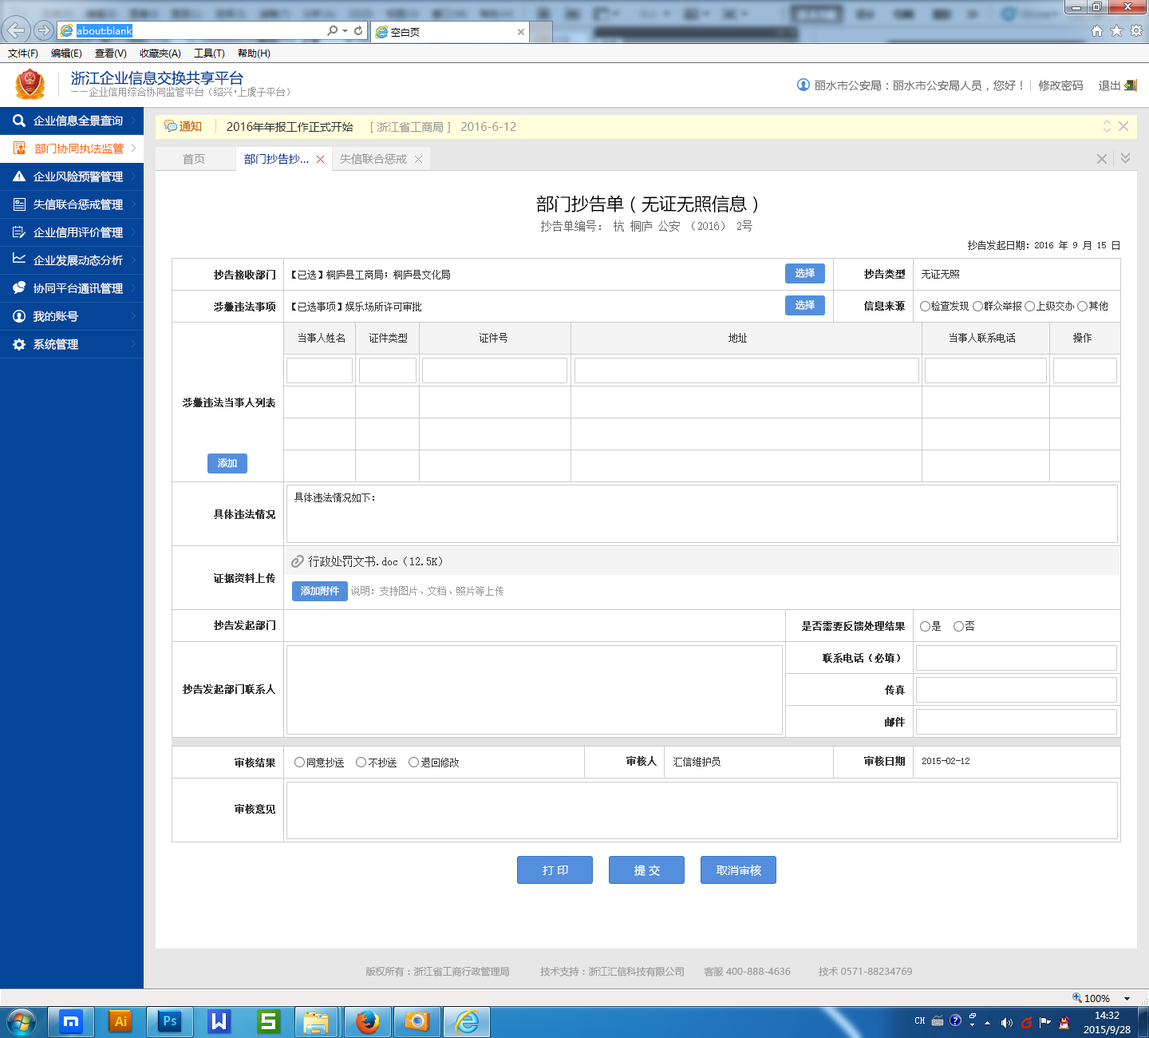
<style>
.page{position:relative;width:1149px;height:1038px;background:#ffffff}
.page>*{position:absolute;margin:0}
.t1{font:14.4px "MicrosoftYaHei";color:#044599}
.t2{font:9.6px "SimSun";color:#999999}
.t3{font:11.2px "MicrosoftYaHei";color:#666666}
.t4{font:11.2px/27.9px "MicrosoftYaHei";color:#ffffff}
.t5{font:11.2px "MicrosoftYaHei";color:#cc6600}
.t6{font:11.2px "MicrosoftYaHei";color:#999999}
.t7{font:11.2px "MicrosoftYaHei";color:#333333}
.t8{font:11.2px "MicrosoftYaHei";color:#ff6600}
.t9{font:11.2px "MicrosoftYaHei";color:#003399}
.t10{font:17.6px "MicrosoftYaHei";color:#000000}
.t11{font:11.2px "SimSun";color:#666666}
.t12{font:9.6px "SimSun";color:#333333}
.t13{font:9.6px/31.9px "SimSun";color:#333333;font-weight:bold}
.t14{font:9.6px/31.9px "SimSun";color:#333333}
.t15{font:9.6px "MicrosoftYaHei";color:#ffffff}
.t16{font:11.2px "SimSun";color:#333333}
.t17{font:9.6px/30.3px "SimSun";color:#333333;font-weight:bold}
.t18{font:9.6px "SimSun";color:#333333;font-weight:bold}
.t19{font:11.2px "MicrosoftYaHei";color:#ffffff}
.t20{font:9.6px "MicrosoftYaHei";color:#999999}
</style>
<div class="page">
<p class="t1" style="left:71px;top:70px;width:172px;height:15px">浙江企业信息交换共享平台</p>
<p class="t2" style="left:71px;top:87px;width:219px;height:10px">——企业信用综合协同监管平台（绍兴•上虞子平台）</p>
<p class="t3" style="left:815px;top:80px;width:207px;height:12px">丽水市公安局：丽水市公安局人员，您好！</p>
<p class="t3" style="left:1038px;top:80px;width:46px;height:12px">修改密码</p>
<p class="t3" style="left:1099px;top:80px;width:22px;height:11px">退出</p>
<p class="t4" style="left:33px;top:115px;width:91px;height:235px">企业信息全景查询<br>部门协同执法监管<br>企业风险预警管理<br>失信联合惩戒管理<br>企业信用评价管理<br>企业发展动态分析<br>协同平台通讯管理<br>我的账号<br>系统管理</p>
<p class="t5" style="left:180px;top:121px;width:22px;height:11px">通知</p>
<p class="t6" style="left:227px;top:121px;width:289px;height:11px"><span class="t7">2016年年报工作正式开始     </span>[ 浙江省工商局 ]   2016-6-12</p>
<p class="t8" style="left:34px;top:143px;width:91px;height:11px">部门协同执法监管</p>
<p class="t6" style="left:183px;top:153px;width:22px;height:11px">首页</p>
<p class="t9" style="left:244px;top:153px;width:65px;height:11px">部门抄告抄…</p>
<p class="t6" style="left:340px;top:153px;width:67px;height:11px">失信联合惩戒</p>
<p class="t10" style="left:536px;top:195px;width:221px;height:18px">部门抄告单（无证无照信息）</p>
<p class="t11" style="left:541px;top:220px;width:212px;height:11px">抄告单编号： 杭 桐庐 公安 （2016） 2号</p>
<p class="t12" style="left:968px;top:240px;width:152px;height:10px">抄告发起日期：2016 年 9 月 15 日</p>
<p class="t13" style="left:183px;top:270px;width:92px;height:424px;text-align:right">抄告接收部门<br>涉嫌违法事项<br><br><br>涉嫌违法当事人列表<br><br><br>具体违法情况<br><br>证据资料上传<br><br>抄告发起部门<br><br>抄告发起部门联系人</p>
<p class="t14" style="left:292px;top:270px;width:158px;height:41px">【已选】桐庐县工商局；桐庐县文化局<br>【已选事项】娱乐场所许可审批</p>
<p class="t15" style="left:796px;top:268px;width:19px;height:10px">选择</p>
<p class="t13" style="left:864px;top:269px;width:41px;height:41px">抄告类型<br>信息来源</p>
<p class="t12" style="left:922px;top:269px;width:37px;height:10px">无证无照</p>
<p class="t15" style="left:796px;top:300px;width:19px;height:10px">选择</p>
<p class="t12" style="left:931px;top:301px;width:177px;height:9px">检查发现   群众举报   上级交办   其他</p>
<p class="t12" style="left:298px;top:333px;width:794px;height:9px">当事人姓名     证件类型               证件号                                              地址                                          当事人联系电话            操作</p>
<p class="t15" style="left:218px;top:458px;width:19px;height:10px">添加</p>
<p class="t12" style="left:295px;top:492px;width:79px;height:10px">具体违法情况如下：</p>
<p class="t16" style="left:309px;top:555px;width:133px;height:12px">行政处罚文书.doc（12.5K）</p>
<p class="t15" style="left:301px;top:586px;width:38px;height:9px">添加附件</p>
<p class="t2" style="left:351px;top:586px;width:153px;height:9px">说明：支持图片、文档、照片等上传</p>
<p class="t13" style="left:802px;top:621px;width:103px;height:105px;text-align:right">是否需要反馈处理结果<br>联系电话（必填）<br>传真<br>邮件</p>
<p class="t12" style="left:932px;top:621px;width:42px;height:10px">是     否</p>
<p class="t17" style="left:235px;top:757px;width:40px;height:56px">审核结果<br><br>审核意见</p>
<p class="t12" style="left:307px;top:757px;width:152px;height:10px">同意抄送     不抄送     退回修改</p>
<p class="t18" style="left:627px;top:756px;width:278px;height:9px">审核人                                     审核日期</p>
<p class="t12" style="left:674px;top:757px;width:47px;height:9px">汇信维护员</p>
<p class="t12" style="left:923px;top:757px;width:47px;height:7px">2015-02-12</p>
<p class="t19" style="left:543px;top:865px;width:25px;height:10px">打 印</p>
<p class="t19" style="left:634px;top:864px;width:26px;height:12px">提 交</p>
<p class="t19" style="left:717px;top:864px;width:44px;height:12px">取消审核</p>
<p class="t20" style="left:366px;top:966px;width:546px;height:10px">版权所有：浙江省工商行政管理局           技术支持：浙江汇信科技有限公司       客服 400-888-4636          技术 0571-88234769</p>
</div>
